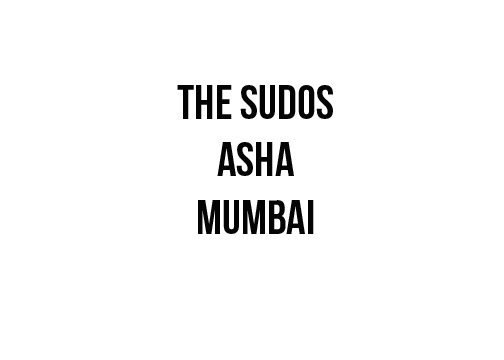
<style>
.page{position:relative;width:504px;height:360px;background:#ffffff}
.page>*{position:absolute;margin:0}
.t1{font:48px "BebasNeueBold";color:#040404}
</style>
<div class="page">
<p class="t1" style="left:177px;top:85px;width:156px;height:149px;text-align:center">the sudos<br>asha<br>mumbai</p>
</div>
